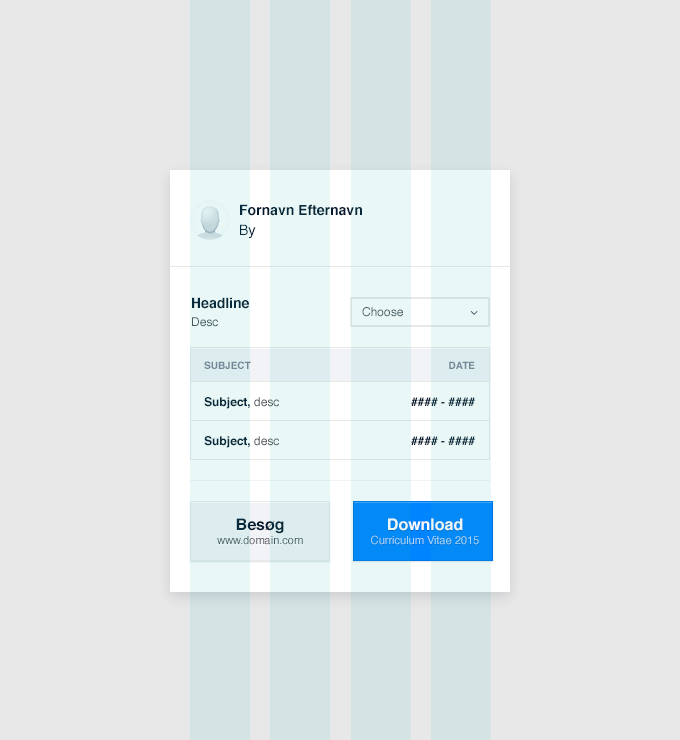
<style>
.page{position:relative;width:680px;height:740px;background:#e8e8e8}
.page>*{position:absolute;margin:0}
.t1{font:14px "Helvetica-Bold";color:#051a30}
.t2{font:14px "Helvetica";color:#051a30}
.t3{font:12px "Helvetica";color:#484e55}
.t4{font:12px "Helvetica";color:#44595f}
.t5{font:10px "Helvetica-Bold";color:#7b8192;text-transform:uppercase}
.t6{font:12px "Helvetica-Bold";color:#051a30}
.t7{font:11px/14px "Helvetica";color:#484e55}
.t8{font:16px/14px "Helvetica-Bold";color:#051a30}
.t9{font:11px/14px "Helvetica";color:#aed8ff}
.t10{font:16px/14px "Helvetica-Bold";color:#ffffff}
</style>
<div class="page">
<p class="t1" style="left:240px;top:204px;width:122px;height:12px">Fornavn Efternavn</p>
<p class="t2" style="left:240px;top:224px;width:16px;height:14px">By</p>
<p class="t1" style="left:192px;top:297px;width:57px;height:12px">Headline</p>
<p class="t3" style="left:192px;top:317px;width:26px;height:10px">Desc</p>
<p class="t4" style="left:362px;top:307px;width:41px;height:10px">Choose</p>
<p class="t5" style="left:204px;top:361px;width:47px;height:8px">Subject</p>
<p class="t5" style="left:449px;top:361px;width:26px;height:8px">Date</p>
<p class="t6" style="left:204px;top:397px;width:75px;height:12px">Subject, <span class="t3">desc</span></p>
<p class="t6" style="left:411px;top:397px;width:64px;height:9px">#### - ####</p>
<p class="t6" style="left:204px;top:436px;width:75px;height:12px">Subject, <span class="t3">desc</span></p>
<p class="t6" style="left:411px;top:436px;width:64px;height:9px">#### - ####</p>
<p class="t7" style="left:217px;top:518px;width:86px;height:27px;text-align:center"><span class="t8">Besøg<br></span>www.domain.com</p>
<p class="t9" style="left:371px;top:518px;width:108px;height:27px;text-align:center"><span class="t10">Download<br></span>Curriculum Vitae 2015</p>
</div>
